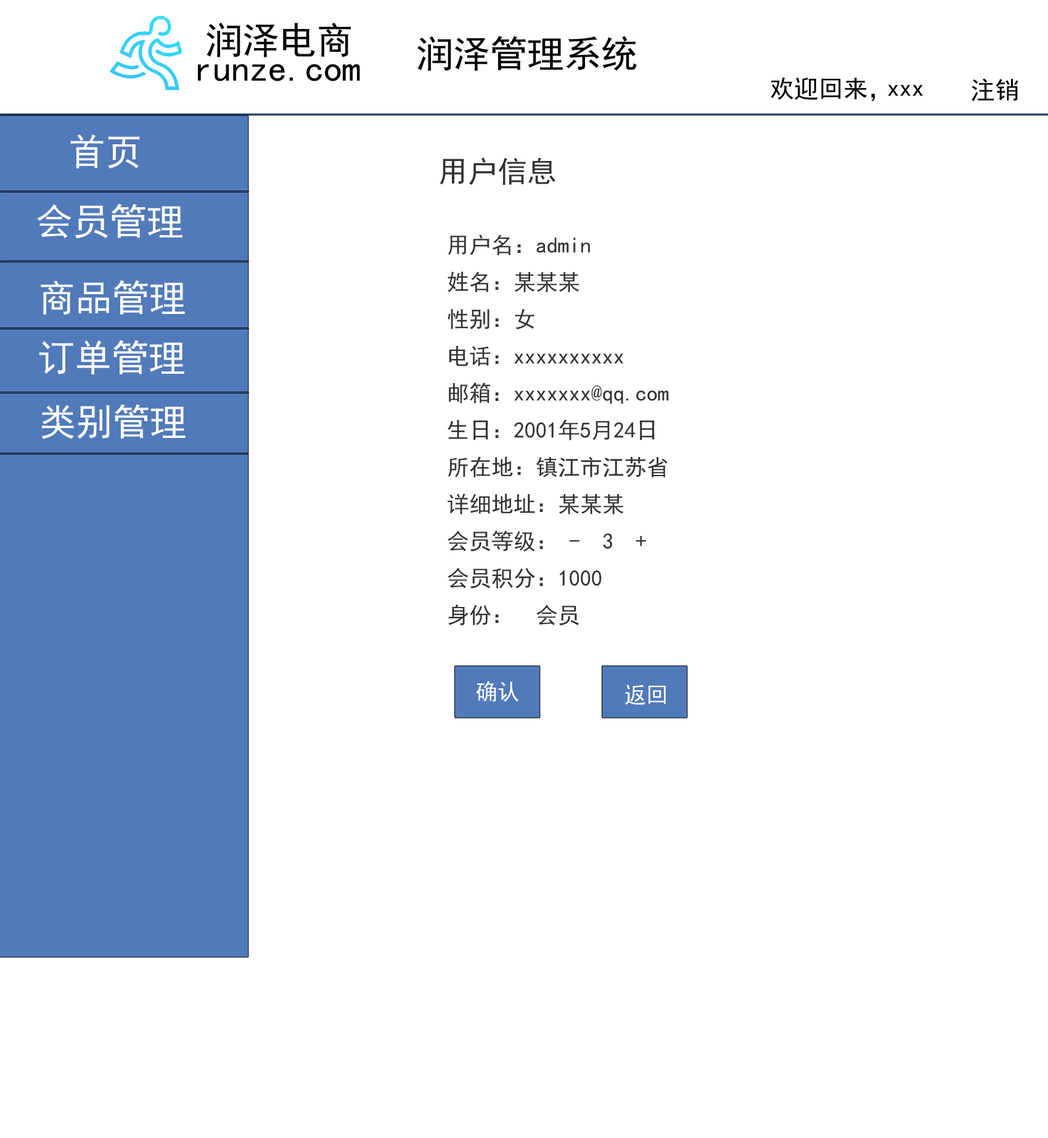
<style>
.page{position:relative;width:1048px;height:1138px;background:#ffffff}
.page>*{position:absolute;margin:0}
.t1{font:37px "SimHei";color:#010101}
.t2{font:24.7px "SimHei";color:#000000}
.t3{font:37px "SimHei";color:#ffffff}
.t4{font:29.6px "SimHei";color:#333333}
.t5{font:22.2px/18.5px "SimHei";color:#333333}
.t6{font:22.2px "SimHei";color:#ffffff}
</style>
<div class="page">
<p class="t1" style="left:207px;top:23px;width:144px;height:34px">润泽电商</p>
<p class="t1" style="left:417px;top:36px;width:220px;height:35px">润泽管理系统</p>
<p class="t1" style="left:198px;top:64px;width:162px;height:17px">runze.com</p>
<p class="t2" style="left:771px;top:77px;width:104px;height:24px">欢迎回来，</p>
<p class="t2" style="left:888px;top:84px;width:35px;height:12px">xxx</p>
<p class="t2" style="left:972px;top:78px;width:47px;height:24px">注销</p>
<p class="t3" style="left:70px;top:134px;width:70px;height:34px">首页</p>
<p class="t4" style="left:440px;top:157px;width:116px;height:28px">用户信息</p>
<p class="t3" style="left:37px;top:203px;width:146px;height:36px">会员管理</p>
<p class="t5" style="left:448px;top:234px;width:221px;height:391px">用户名：admin<br><br>姓名：某某某<br><br>性别：女<br><br>电话：xxxxxxxxxx<br><br>邮箱：xxxxxxx@qq.com<br><br>生日：2001年5月24日<br><br>所在地：镇江市江苏省<br><br>详细地址：某某某<br><br>会员等级： -  3  +<br><br>会员积分：1000<br><br>身份：  会员</p>
<p class="t3" style="left:41px;top:280px;width:144px;height:35px">商品管理</p>
<p class="t3" style="left:39px;top:340px;width:145px;height:34px">订单管理</p>
<p class="t3" style="left:41px;top:404px;width:145px;height:35px">类别管理</p>
<p class="t6" style="left:476px;top:681px;width:43px;height:21px">确认</p>
<p class="t6" style="left:625px;top:684px;width:41px;height:21px">返回</p>
</div>
